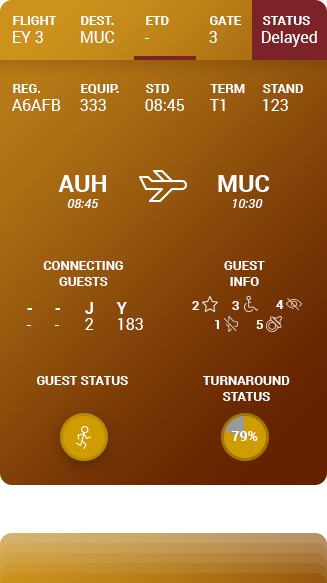
<style>
.page{position:relative;width:327px;height:583px}
.page>*{position:absolute;margin:0}
.t1{font:13px "Roboto-Bold";color:#ffffff;text-transform:uppercase}
.t2{font:16px "Roboto-Regular";color:#ffffff}
.t3{font:24px "Roboto-Bold";color:#ffffff}
.t4{font:13px "Roboto-Italic";color:#ffffff}
.t5{font:16px/16px "Roboto-Bold";color:#ffffff}
.t6{font:16px/16px "Roboto-Regular";color:#ffffff}
.t7{font:14px "Roboto-Bold";color:#fefefe}
</style>
<div class="page">
<p class="t1" style="left:13px;top:16px;width:44px;height:9px">FLIGHT</p>
<p class="t1" style="left:81px;top:16px;width:33px;height:9px">DEST.</p>
<p class="t1" style="left:146px;top:16px;width:23px;height:9px">ETD</p>
<p class="t1" style="left:210px;top:16px;width:32px;height:9px">Gate</p>
<p class="t1" style="left:263px;top:16px;width:47px;height:9px">Status</p>
<p class="t2" style="left:13px;top:31px;width:30px;height:12px">EY 3</p>
<p class="t2" style="left:81px;top:31px;width:33px;height:12px">MUC</p>
<p class="t2" style="left:144px;top:38px;width:5px;height:1px">-</p>
<p class="t2" style="left:209px;top:31px;width:8px;height:12px">3</p>
<p class="t2" style="left:262px;top:31px;width:55px;height:16px">Delayed</p>
<p class="t1" style="left:13px;top:84px;width:28px;height:9px">Reg.</p>
<p class="t1" style="left:81px;top:84px;width:38px;height:10px">EQuip.</p>
<p class="t1" style="left:146px;top:84px;width:23px;height:9px">STD</p>
<p class="t1" style="left:210px;top:84px;width:35px;height:9px">Term</p>
<p class="t1" style="left:263px;top:84px;width:40px;height:9px">stand</p>
<p class="t2" style="left:11px;top:99px;width:50px;height:12px">A6AFB</p>
<p class="t2" style="left:80px;top:99px;width:26px;height:12px">333</p>
<p class="t2" style="left:145px;top:99px;width:39px;height:12px">08:45</p>
<p class="t2" style="left:209px;top:99px;width:16px;height:12px">T1</p>
<p class="t2" style="left:263px;top:99px;width:25px;height:12px">123</p>
<p class="t3" style="left:58px;top:175px;width:48px;height:17px">AUH</p>
<p class="t3" style="left:218px;top:175px;width:51px;height:17px">MUC</p>
<p class="t4" style="left:67px;top:199px;width:32px;height:9px">08:45</p>
<p class="t4" style="left:233px;top:199px;width:30px;height:9px">10:30</p>
<p class="t1" style="left:43px;top:261px;width:80px;height:25px;text-align:center">Connecting<br>Guests</p>
<p class="t1" style="left:224px;top:261px;width:41px;height:25px;text-align:center">Guest<br>Info</p>
<p class="t5" style="left:85px;top:302px;width:9px;height:28px">J<br><span class="t6">2</span></p>
<p class="t6" style="left:116px;top:302px;width:27px;height:28px"><span class="t5">Y<br></span>183</p>
<p class="t1" style="left:192px;top:301px;width:8px;height:9px">2</p>
<p class="t1" style="left:232px;top:301px;width:7px;height:9px">3</p>
<p class="t1" style="left:276px;top:300px;width:8px;height:9px">4</p>
<p class="t5" style="left:26px;top:308px;width:6px;height:18px">-<br><span class="t6">-</span></p>
<p class="t5" style="left:54px;top:308px;width:6px;height:18px">-<br><span class="t6">-</span></p>
<p class="t1" style="left:215px;top:320px;width:4px;height:9px">1</p>
<p class="t1" style="left:256px;top:320px;width:7px;height:9px">5</p>
<p class="t1" style="left:37px;top:376px;width:91px;height:9px">Guest Status</p>
<p class="t1" style="left:203px;top:376px;width:87px;height:25px;text-align:center">Turnaround<br>Status</p>
<p class="t7" style="left:231px;top:431px;width:27px;height:10px">79%</p>
</div>
